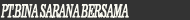
<style>
.page{position:relative;width:190px;height:20px;background:#333333}
.page>*{position:absolute;margin:0}
.t1{font:18.3px "News701BT-ItalicA";letter-spacing:-0.125em;color:#fafaf1;font-weight:bold;scale:0.53 1}
</style>
<div class="page">
<p class="t1" style="left:0px;top:4px;width:129px;height:14px">PT.BINA SARANA BERSAMA</p>
</div>
